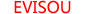
<style>
.page{position:relative;width:86px;height:14px;background:#ffffff}
.page>*{position:absolute;margin:0}
.t1{font:16px "MicrosoftYaHei";color:#ff0000}
</style>
<div class="page">
<p class="t1" style="left:14px;top:0px;width:57px;height:14px">EVISOU</p>
</div>
